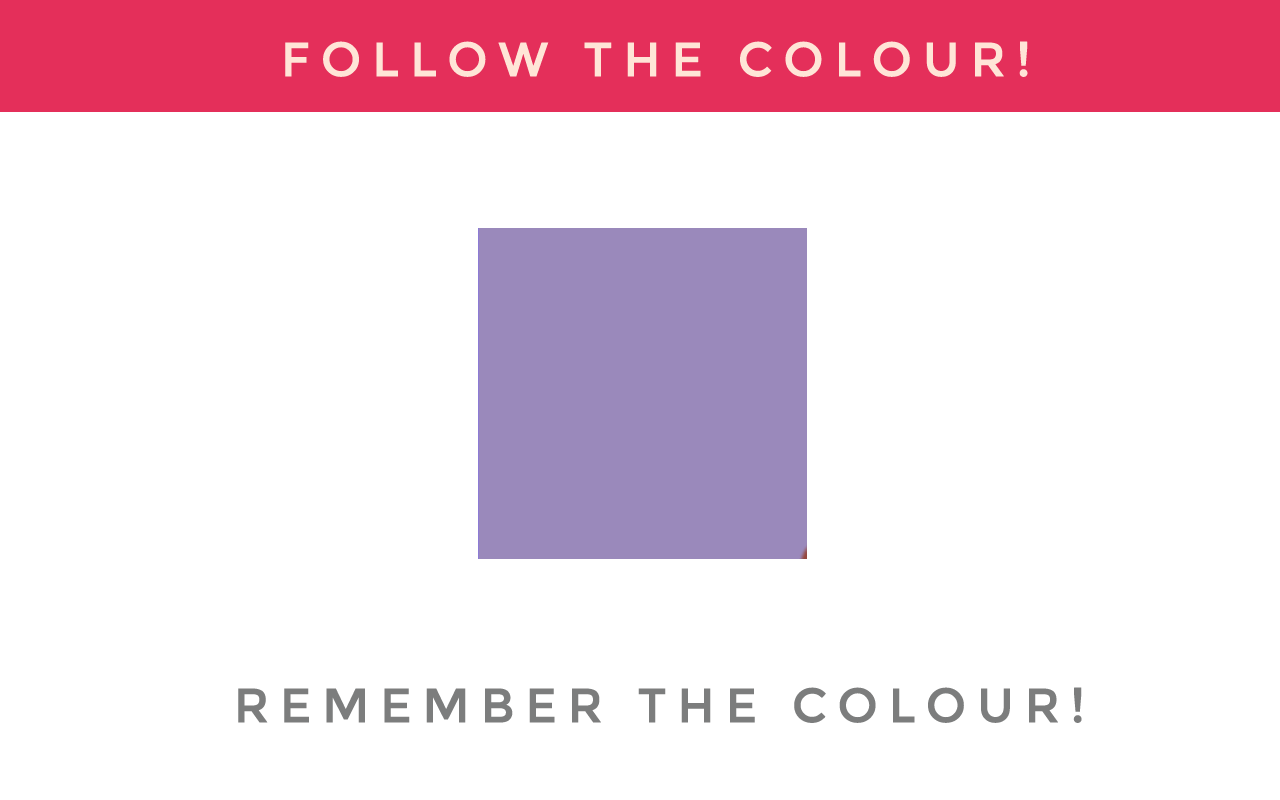
<style>
.page{position:relative;width:1280px;height:800px;background:#ffffff}
.page>*{position:absolute;margin:0}
.t1{font:48px "Montserrat-Regular";letter-spacing:0.2em;color:#ffe5d7;text-transform:uppercase;font-weight:bold}
.t2{font:48px "Montserrat-Regular";letter-spacing:0.2em;color:#7c7d7d;text-transform:uppercase;font-weight:bold}
</style>
<div class="page">
<p class="t1" style="left:285px;top:41px;width:743px;height:36px">Follow the Colour!</p>
<p class="t2" style="left:238px;top:687px;width:844px;height:36px">REMEMBER THE COLOUR!</p>
</div>
